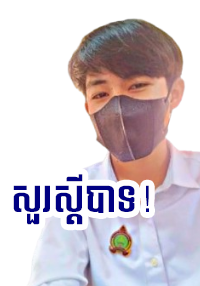
<style>
.page{position:relative;width:200px;height:286px;background:#ffffff}
.page>*{position:absolute;margin:0}
.t1{font:36.1px "NiDA-Bayon";color:#000082}
</style>
<div class="page">
<p class="t1" style="left:13px;top:174px;width:136px;height:51px">សួរស្តីបាទ!</p>
</div>
